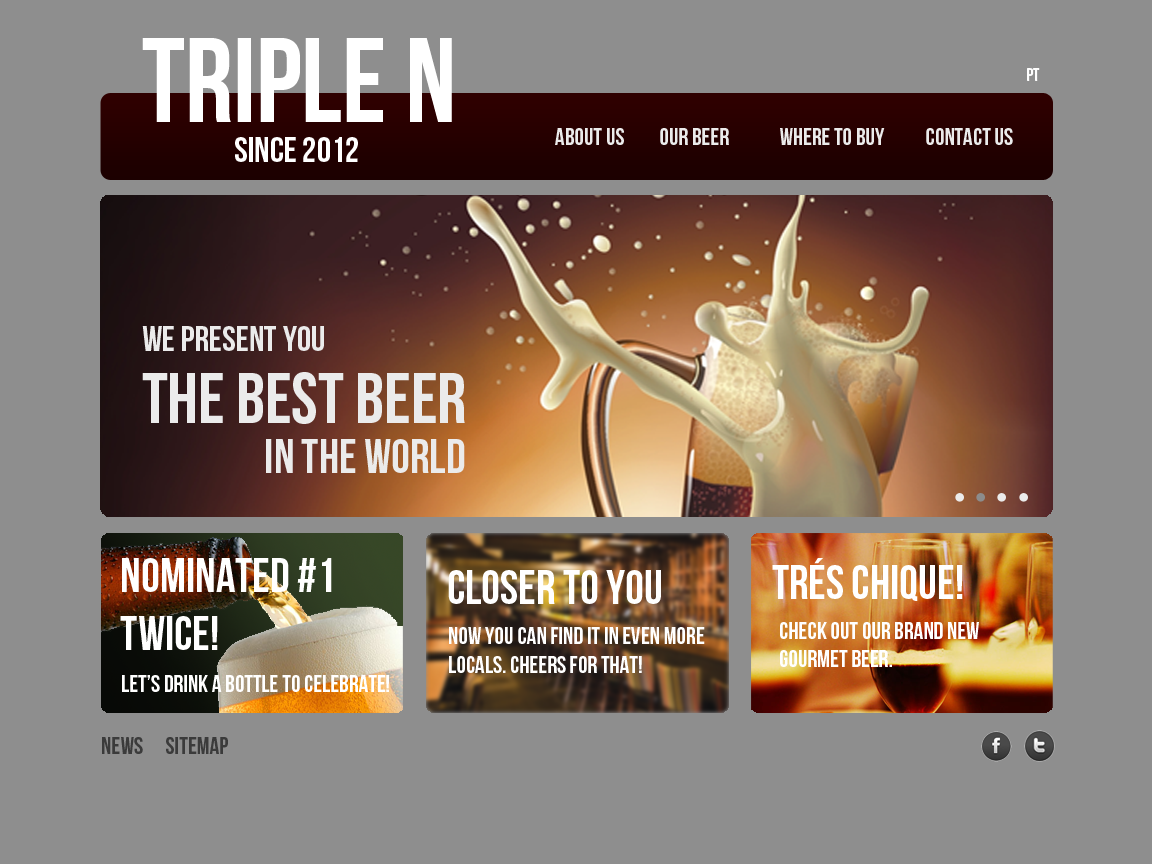
<style>
.page{position:relative;width:1152px;height:864px;background:#8e8e8e}
.page>*{position:absolute;margin:0}
.t1{font:120px "BebasNeue";color:#ffffff;text-transform:uppercase}
.t2{font:18px "BebasNeue";color:#ffffff;text-transform:uppercase}
.t3{font:36px "BebasNeue";color:#ffffff;text-transform:uppercase}
.t4{font:24px "BebasNeue";color:#ebebeb;text-transform:uppercase}
.t5{font:36px "BebasNeue";color:#ebebeb;text-transform:uppercase}
.t6{font:72px "BebasNeue";color:#ebebeb;text-transform:uppercase}
.t7{font:48px "BebasNeue";color:#ebebeb;text-transform:uppercase}
.t8{font:48px "BebasNeue";color:#ffffff;text-transform:uppercase}
.t9{font:24px "BebasNeue";color:#ffffff;text-transform:uppercase}
.t10{font:24px "BebasNeue";color:#3b3b3b;text-transform:uppercase}
</style>
<div class="page">
<p class="t1" style="left:142px;top:38px;width:310px;height:84px">TRIPLE N</p>
<p class="t2" style="left:1027px;top:68px;width:13px;height:13px">pt</p>
<p class="t3" style="left:235px;top:137px;width:123px;height:25px">SINCE 2012</p>
<p class="t4" style="left:555px;top:128px;width:69px;height:17px">about us</p>
<p class="t4" style="left:660px;top:128px;width:69px;height:17px">our beer</p>
<p class="t4" style="left:780px;top:128px;width:105px;height:17px">where to buy</p>
<p class="t4" style="left:926px;top:128px;width:87px;height:17px">contact us</p>
<p class="t5" style="left:142px;top:326px;width:182px;height:25px">WE PRESENT YOU</p>
<p class="t6" style="left:142px;top:372px;width:323px;height:52px">the best beer</p>
<p class="t7" style="left:266px;top:439px;width:199px;height:34px">IN THE WORLD</p>
<p class="t8" style="left:120px;top:558px;width:212px;height:92px">nominated #1<br>twice!</p>
<p class="t8" style="left:772px;top:558px;width:191px;height:43px">tRÉS CHIQUE!</p>
<p class="t8" style="left:448px;top:570px;width:213px;height:34px">CLOSER TO YOU</p>
<p class="t9" style="left:449px;top:627px;width:256px;height:46px">NOW YOU CAN FIND IT IN EVEN MORE<br>LOCALS. CHEERS FOR THAT!</p>
<p class="t9" style="left:780px;top:622px;width:199px;height:45px">CHECK OUT OUR BRAND NEW<br>GOURMET BEER.</p>
<p class="t9" style="left:122px;top:675px;width:267px;height:17px">leT’S DRINK A BOTTLE TO CELEBRATE!</p>
<p class="t10" style="left:102px;top:737px;width:41px;height:17px">News</p>
<p class="t10" style="left:166px;top:737px;width:62px;height:17px">sitemap</p>
</div>
